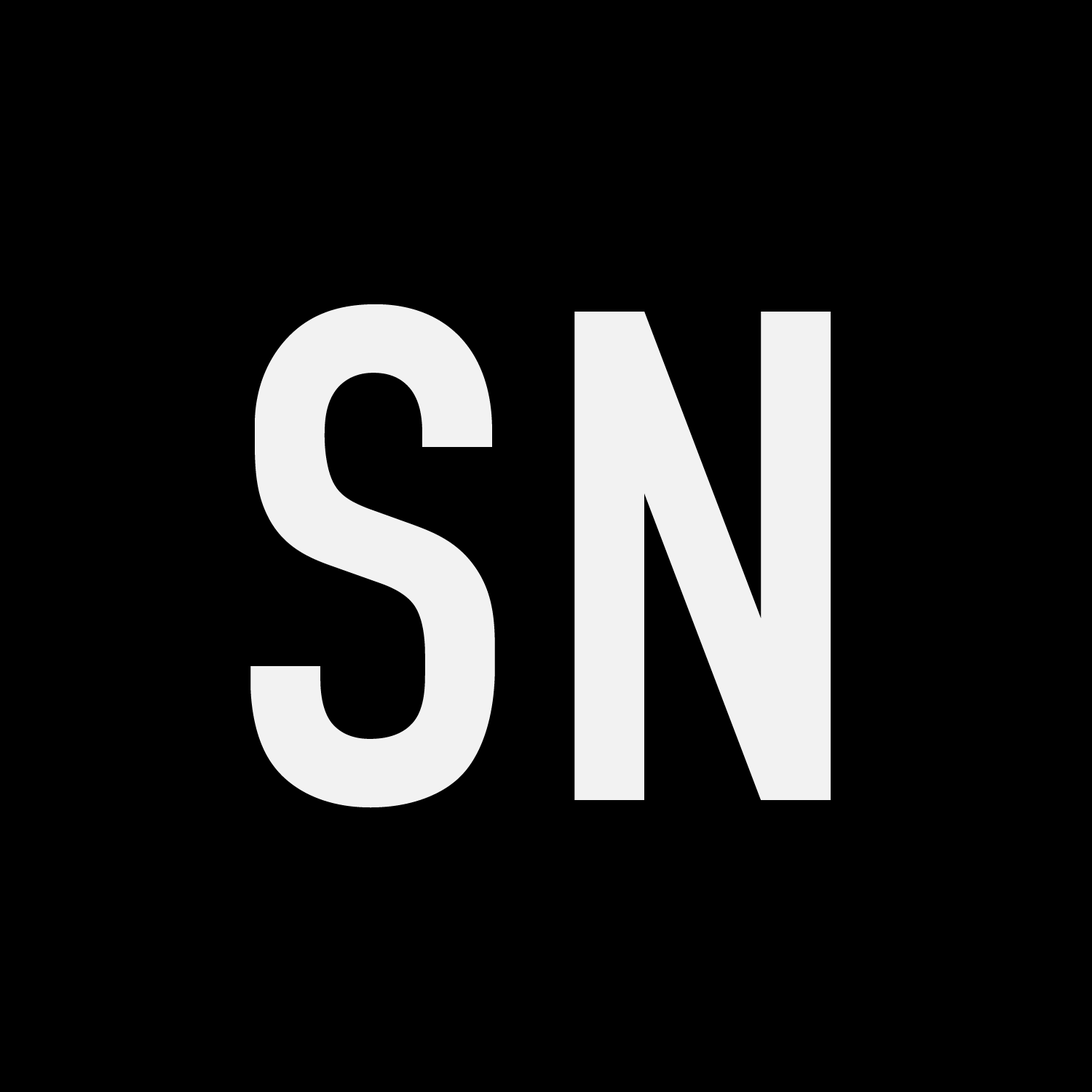
<style>
.page{position:relative;width:1092px;height:1092px;background:#000000}
.page>*{position:absolute;margin:0}
.t1{font:697.7px "DINCondensed-Regular";letter-spacing:0.01em;color:#f2f2f2}
</style>
<div class="page">
<p class="t1" style="left:250px;top:304px;width:581px;height:504px">SN</p>
</div>
